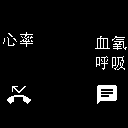
<style>
.page{position:relative;width:128px;height:128px;background:#000000}
.page>*{position:absolute;margin:0}
.t1{font:16px "AdobeHeitiStd-Regular";color:#ffffff}
</style>
<div class="page">
<p class="t1" style="left:3px;top:32px;width:30px;height:15px">心率</p>
<p class="t1" style="left:95px;top:36px;width:32px;height:14px">血氧</p>
<p class="t1" style="left:96px;top:56px;width:29px;height:14px">呼吸</p>
</div>
